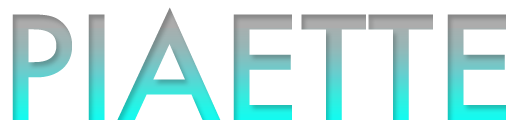
<style>
.page{position:relative;width:512px;height:128px;background:#ffffff}
.page>*{position:absolute;margin:0}
.t1{font:140px "Futura-Medium"}
</style>
<div class="page">
<p class="t1" style="left:12px;top:7px;width:494px;height:113px">PIAETTE</p>
</div>
